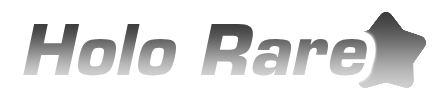
<style>
.page{position:relative;width:440px;height:100px;background:#ffffff}
.page>*{position:absolute;margin:0}
.t1{font:68px "Eurostile-BoldOblique"}
</style>
<div class="page">
<p class="t1" style="left:23px;top:23px;width:344px;height:53px">Holo Rare</p>
</div>
